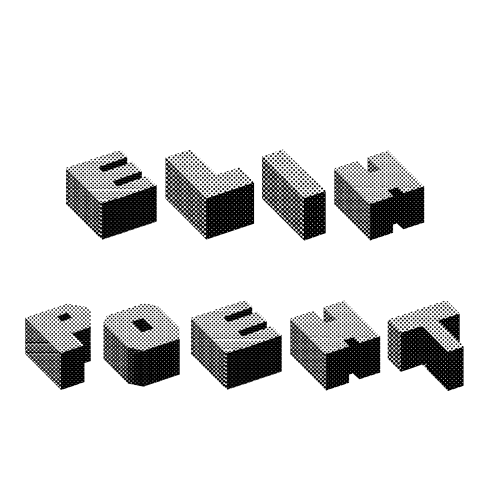
<style>
.page{position:relative;width:500px;height:500px;background:#ffffff}
.page>*{position:absolute;margin:0}
.t1{font:125px "Cubefont";color:#000000}
</style>
<div class="page">
<p class="t1" style="left:25px;top:149px;width:439px;height:242px;text-align:center">ELIH<br>POEHT</p>
</div>
